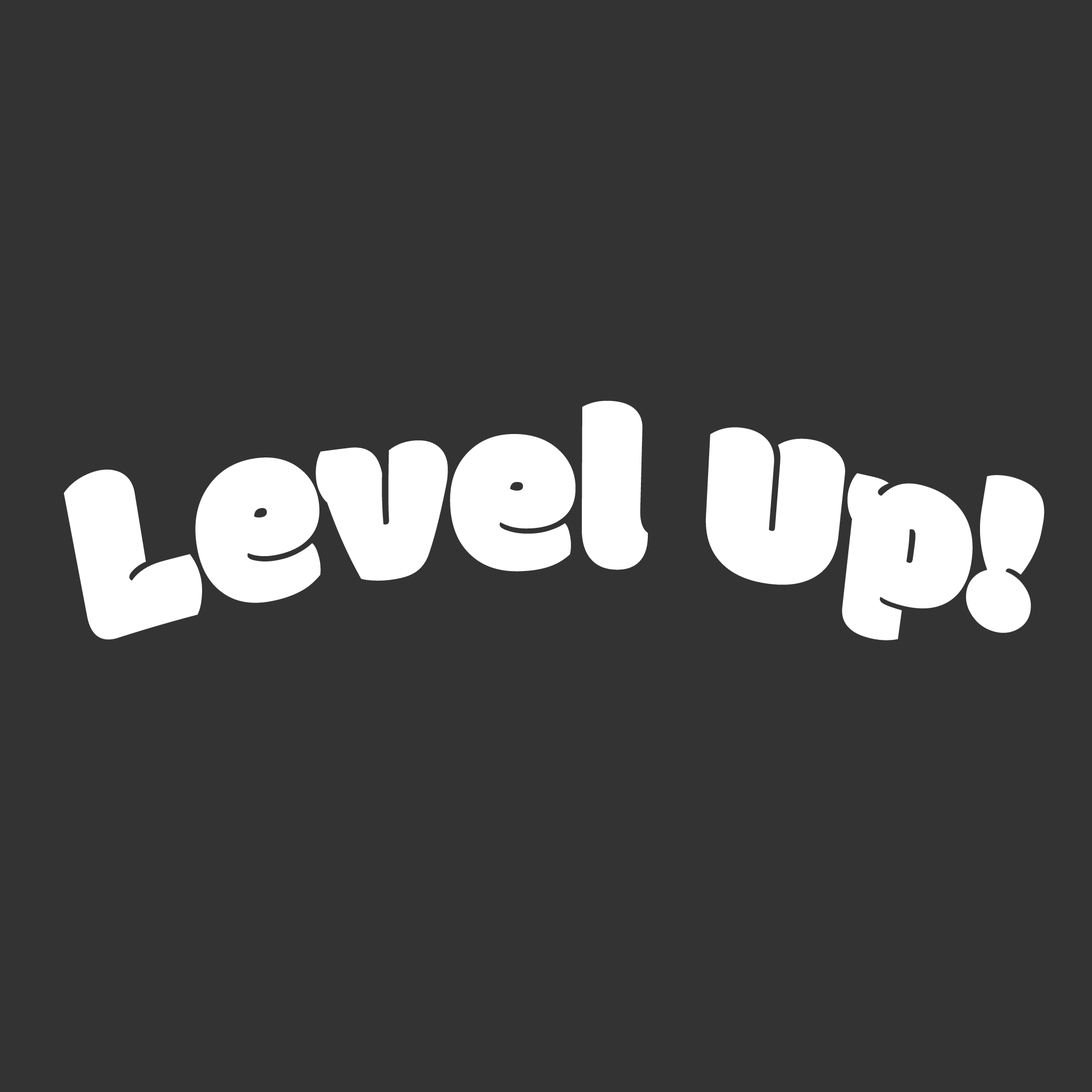
<style>
.page{position:relative;width:1092px;height:1092px;background:#333333}
.page>*{position:absolute;margin:0}
.t1{font:244.1px "Modak";color:#ffffff;scale:0.87 1}
</style>
<div class="page">
<p class="t1" style="left:63px;top:400px;width:982px;height:240px">Level Up!</p>
</div>
